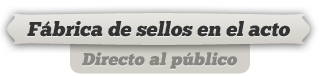
<style>
.page{position:relative;width:320px;height:80px;background:#ffffff}
.page>*{position:absolute;margin:0}
.t1{font:20px "ChunkFive-Roman";color:#333333;font-style:italic}
.t2{font:17px "ChunkFive-Roman";color:#888681;font-weight:bold;font-style:italic}
</style>
<div class="page">
<p class="t1" style="left:27px;top:21px;width:263px;height:16px">Fábrica de sellos en el acto</p>
<p class="t2" style="left:82px;top:52px;width:156px;height:17px">Directo al público</p>
</div>
